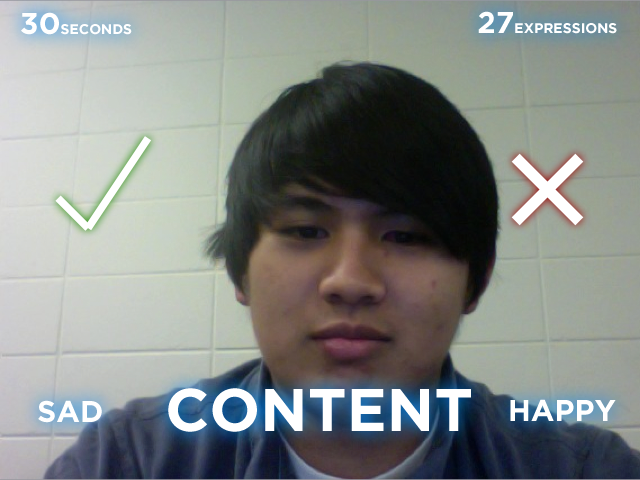
<style>
.page{position:relative;width:640px;height:480px}
.page>*{position:absolute;margin:0}
.t1{font:14px "GothamHTF-Bold";color:#ffffff}
.t2{font:30px "GothamHTF-Bold";color:#ffffff}
.t3{font:60px "GothamHTF-Bold";color:#ffffff}
</style>
<div class="page">
<p class="t1" style="left:21px;top:12px;width:111px;height:23px"><span class="t2">30</span>SECONDS</p>
<p class="t1" style="left:478px;top:11px;width:139px;height:23px"><span class="t2">27</span>EXPRESSIONS</p>
<p class="t3" style="left:168px;top:388px;width:303px;height:44px">CONTENT</p>
<p class="t2" style="left:38px;top:400px;width:64px;height:23px">SAD</p>
<p class="t2" style="left:510px;top:399px;width:106px;height:22px">HAPPY</p>
</div>
